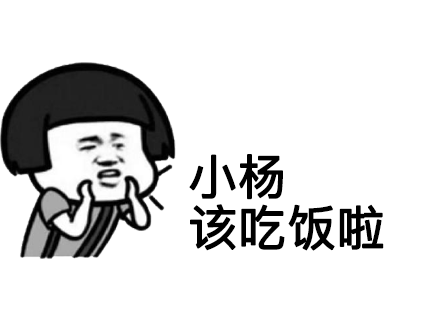
<style>
.page{position:relative;width:440px;height:321px;background:#ffffff}
.page>*{position:absolute;margin:0}
.t1{font:48px/51px "PingFangSC-Regular";color:#000000;font-weight:bold}
</style>
<div class="page">
<p class="t1" style="left:189px;top:154px;width:195px;height:97px">小杨<br>该吃饭啦</p>
</div>
